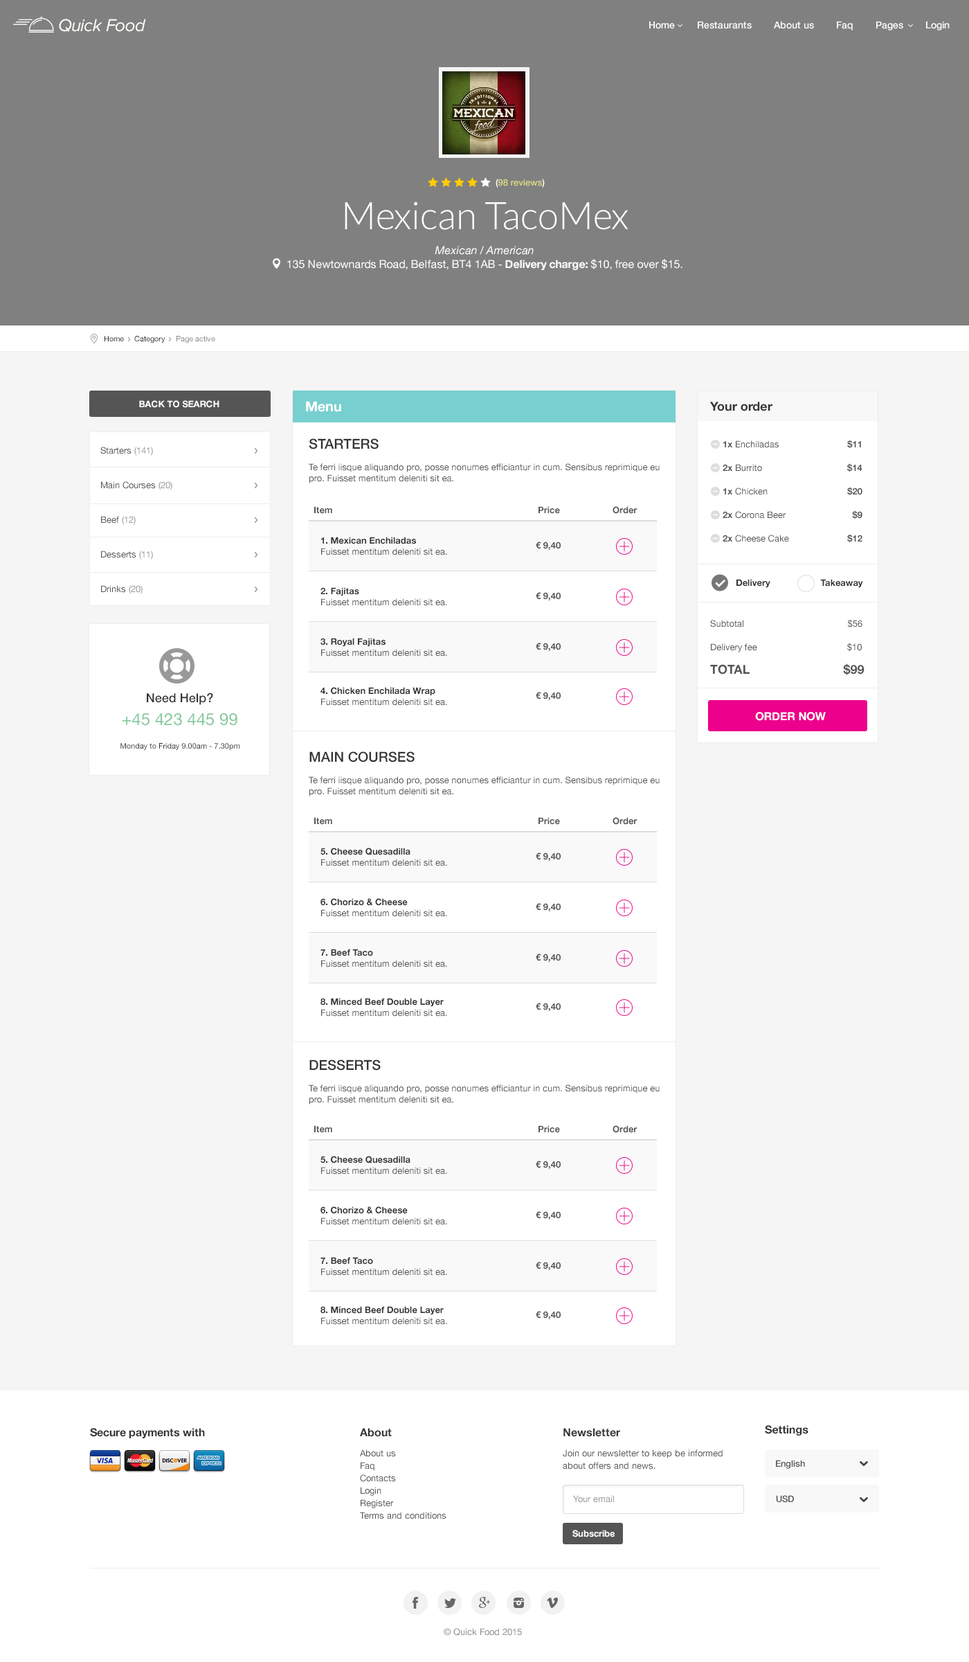
<style>
.page{position:relative;width:969px;height:1662px;background:#ffffff}
.page>*{position:absolute;margin:0}
.t1{font:18px "ProximaNova-RegularIt";letter-spacing:-0.025em;color:#fefef9}
.t2{font:9.7px "HelveticaNeue-Medium";color:#ffffff}
.t3{font:9px "HelveticaNeue-Medium";color:#dcda80}
.t4{font:9px "HelveticaNeue-Medium";color:#ffffff}
.t5{font:11.1px/13.8px "HelveticaNeue";color:#ffffff}
.t6{font:38.1px/16.6px "Lato-Light";color:#ffffff}
.t7{font:11.1px/24.9px "HelveticaNeue-Italic";color:#ffffff}
.t8{font:11.1px/13.8px "HelveticaNeue-Bold";color:#ffffff}
.t9{font:7.6px "HelveticaNeue";color:#252525}
.t10{font:7.6px "HelveticaNeue";color:#888888}
.t11{font:9px "HelveticaNeue-Bold";color:#ffffff;text-transform:uppercase}
.t12{font:13.8px "HelveticaNeue-Bold";color:#ffffff}
.t13{font:12.5px "HelveticaNeue-Bold";color:#333333}
.t14{font:9px/34.6px "HelveticaNeue";color:#555555}
.t15{font:9px/34.6px "HelveticaNeue";color:#999999}
.t16{font:9px "HelveticaNeue";color:#555555}
.t17{font:13.8px "HelveticaNeue-Medium";color:#333333}
.t18{font:9px/23.5px "HelveticaNeue-Bold";color:#555555}
.t19{font:9px/23.5px "HelveticaNeue";color:#555555}
.t20{font:9px "HelveticaNeue-Bold";color:#555555}
.t21{font:9px "HelveticaNeue-Bold";color:#333333}
.t22{font:12.5px/23.5px "HelveticaNeue-Bold";color:#555555}
.t23{font:12.5px "HelveticaNeue-Medium";color:#333333}
.t24{font:16.6px "HelveticaNeue";color:#85c99d}
.t25{font:11.1px "HelveticaNeue-Bold";color:#ffffff}
.t26{font:7.6px "HelveticaNeue";color:#333333}
.t27{font:11.1px "HelveticaNeue-Bold";color:#333333}
.t28{font:9px/12.5px "HelveticaNeue";color:#555555}
.t29{font:9px "HelveticaNeue-Medium";color:#555555}
.t30{font:9px "HelveticaNeue";color:#999999}
.t31{font:9px "HelveticaNeue-Bold";color:#ffffff}
.t32{font:9px "HelveticaNeue";color:#8c8c8c}
</style>
<div class="page">
<p class="t1" style="left:59px;top:19px;width:87px;height:13px">Quick Food</p>
<p class="t2" style="left:649px;top:21px;width:301px;height:9px">Home        Restaurants        About us        Faq        Pages        Login</p>
<p class="t3" style="left:496px;top:179px;width:49px;height:9px"><span class="t4">(</span>98 reviews<span class="t4">)</span></p>
<p class="t5" style="left:287px;top:201px;width:396px;height:69px;text-align:center"><span class="t6">Mexican TacoMex<br></span><span class="t7">Mexican / American<br></span>135 Newtownards Road, Belfast, BT4 1AB - <span class="t8">Delivery charge: </span>$10, free over $15.</p>
<p class="t9" style="left:105px;top:336px;width:110px;height:7px">Home     Category     <span class="t10">Page active</span></p>
<p class="t11" style="left:139px;top:400px;width:80px;height:8px">BACK TO SEARCH</p>
<p class="t12" style="left:306px;top:401px;width:35px;height:11px">Menu</p>
<p class="t13" style="left:710px;top:402px;width:63px;height:9px">Your order</p>
<p class="t14" style="left:100px;top:447px;width:72px;height:147px">Starters <span class="t15">(141)<br></span>Main Courses <span class="t15">(20)<br></span>Beef <span class="t15">(12)<br></span>Desserts <span class="t15">(11)<br></span>Drinks <span class="t15">(20)</span></p>
<p class="t16" style="left:309px;top:438px;width:351px;height:45px"><span class="t17">STARTERS<br><br></span>Te ferri iisque aliquando pro, posse nonumes efficiantur in cum. Sensibus reprimique eu pro. Fuisset mentitum deleniti sit ea.</p>
<p class="t18" style="left:723px;top:440px;width:140px;height:103px"><span class="t19">     </span>1x<span class="t19"> Enchiladas                 </span>$11<br>     2x<span class="t19"> Burrito       </span> $14<br>     1x<span class="t19"> Chicken                          </span>$20<br>     2x<span class="t19"> Corona Beer                  </span>$9<br>     2x<span class="t19"> Cheese Cake               </span> $12</p>
<p class="t20" style="left:314px;top:506px;width:324px;height:8px">Item         Price   Order</p>
<p class="t16" style="left:321px;top:537px;width:126px;height:18px"><span class="t21">1. Mexican Enchiladas<br></span>Fuisset mentitum deleniti sit ea.</p>
<p class="t20" style="left:536px;top:541px;width:25px;height:9px">€ 9,40</p>
<p class="t21" style="left:737px;top:579px;width:126px;height:9px">Delivery           Takeaway</p>
<p class="t16" style="left:321px;top:587px;width:126px;height:19px"><span class="t21">2. Fajitas<br></span>Fuisset mentitum deleniti sit ea.</p>
<p class="t20" style="left:536px;top:592px;width:25px;height:9px">€ 9,40</p>
<p class="t19" style="left:710px;top:619px;width:155px;height:56px">Subtotal                                     $56<br>Delivery fee                                    $10<br><span class="t22">TOTAL                           $99</span></p>
<p class="t16" style="left:321px;top:638px;width:126px;height:18px"><span class="t21">3. Royal Fajitas<br></span>Fuisset mentitum deleniti sit ea.</p>
<p class="t20" style="left:536px;top:642px;width:25px;height:9px">€ 9,40</p>
<p class="t16" style="left:321px;top:687px;width:126px;height:18px"><span class="t21">4. Chicken Enchilada Wrap<br></span>Fuisset mentitum deleniti sit ea.</p>
<p class="t23" style="left:147px;top:692px;width:66px;height:13px">Need Help?</p>
<p class="t20" style="left:536px;top:692px;width:25px;height:9px">€ 9,40</p>
<p class="t24" style="left:123px;top:713px;width:114px;height:13px">+45 423 445 99</p>
<p class="t25" style="left:755px;top:712px;width:71px;height:9px">ORDER NOW</p>
<p class="t26" style="left:120px;top:743px;width:120px;height:7px">Monday to Friday 9.00am - 7.30pm</p>
<p class="t16" style="left:309px;top:751px;width:351px;height:45px"><span class="t17">MAIN COURSES<br><br></span>Te ferri iisque aliquando pro, posse nonumes efficiantur in cum. Sensibus reprimique eu pro. Fuisset mentitum deleniti sit ea.</p>
<p class="t20" style="left:314px;top:817px;width:324px;height:8px">Item         Price   Order</p>
<p class="t16" style="left:321px;top:847px;width:126px;height:19px"><span class="t21">5. Cheese Quesadilla<br></span>Fuisset mentitum deleniti sit ea.</p>
<p class="t20" style="left:536px;top:852px;width:25px;height:9px">€ 9,40</p>
<p class="t16" style="left:321px;top:898px;width:126px;height:19px"><span class="t21">6. Chorizo &amp; Cheese<br></span>Fuisset mentitum deleniti sit ea.</p>
<p class="t20" style="left:536px;top:903px;width:25px;height:9px">€ 9,40</p>
<p class="t16" style="left:321px;top:948px;width:126px;height:19px"><span class="t21">7. Beef Taco<br></span>Fuisset mentitum deleniti sit ea.</p>
<p class="t20" style="left:536px;top:953px;width:25px;height:9px">€ 9,40</p>
<p class="t16" style="left:321px;top:998px;width:126px;height:18px"><span class="t21">8. Minced Beef Double Layer<br></span>Fuisset mentitum deleniti sit ea.</p>
<p class="t20" style="left:536px;top:1002px;width:25px;height:9px">€ 9,40</p>
<p class="t16" style="left:309px;top:1059px;width:351px;height:45px"><span class="t17">DESSERTS<br><br></span>Te ferri iisque aliquando pro, posse nonumes efficiantur in cum. Sensibus reprimique eu pro. Fuisset mentitum deleniti sit ea.</p>
<p class="t20" style="left:314px;top:1125px;width:324px;height:8px">Item         Price   Order</p>
<p class="t16" style="left:321px;top:1155px;width:126px;height:19px"><span class="t21">5. Cheese Quesadilla<br></span>Fuisset mentitum deleniti sit ea.</p>
<p class="t20" style="left:536px;top:1160px;width:25px;height:9px">€ 9,40</p>
<p class="t16" style="left:321px;top:1206px;width:126px;height:19px"><span class="t21">6. Chorizo &amp; Cheese<br></span>Fuisset mentitum deleniti sit ea.</p>
<p class="t20" style="left:536px;top:1211px;width:25px;height:9px">€ 9,40</p>
<p class="t16" style="left:321px;top:1257px;width:126px;height:18px"><span class="t21">7. Beef Taco<br></span>Fuisset mentitum deleniti sit ea.</p>
<p class="t20" style="left:536px;top:1261px;width:25px;height:9px">€ 9,40</p>
<p class="t16" style="left:321px;top:1306px;width:126px;height:18px"><span class="t21">8. Minced Beef Double Layer<br></span>Fuisset mentitum deleniti sit ea.</p>
<p class="t20" style="left:536px;top:1311px;width:25px;height:9px">€ 9,40</p>
<p class="t27" style="left:90px;top:1428px;width:115px;height:10px">Secure payments with</p>
<p class="t27" style="left:360px;top:1428px;width:32px;height:9px">About</p>
<p class="t27" style="left:564px;top:1428px;width:56px;height:9px">Newsletter</p>
<p class="t27" style="left:765px;top:1425px;width:44px;height:10px">Settings</p>
<p class="t28" style="left:360px;top:1449px;width:87px;height:70px">About us<br>Faq<br>Contacts<br>Login<br>Register<br>Terms and conditions</p>
<p class="t28" style="left:563px;top:1449px;width:160px;height:20px">Join our newsletter to keep be informed about offers and news.</p>
<p class="t29" style="left:776px;top:1459px;width:29px;height:9px">English</p>
<p class="t30" style="left:573px;top:1495px;width:41px;height:7px">Your email</p>
<p class="t29" style="left:776px;top:1495px;width:18px;height:7px">USD</p>
<p class="t31" style="left:573px;top:1529px;width:42px;height:8px">Subscribe</p>
<p class="t32" style="left:444px;top:1628px;width:78px;height:7px">© Quick Food 2015</p>
</div>
